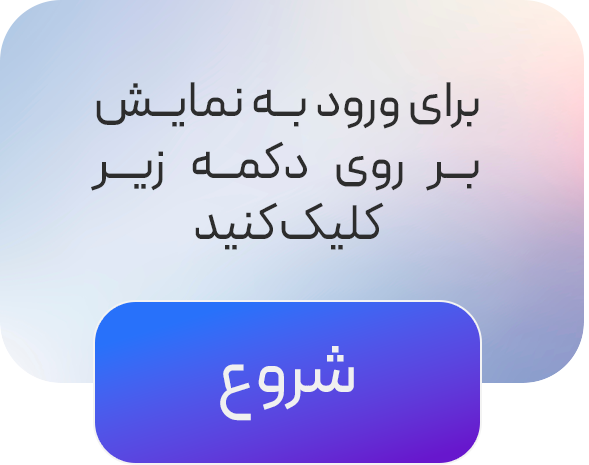
<style>
.page{position:relative;width:589px;height:465px}
.page>*{position:absolute;margin:0}
.t1{font:51px "Peyda-Regular";letter-spacing:-0.015em;color:#2d2d2d}
.t2{font:72px "Peyda-Regular";letter-spacing:-0.015em;color:#f0f0f0}
</style>
<div class="page">
<p class="t1" style="left:91px;top:82px;width:388px;height:168px;text-align:justify">برای ورود به نمایش<br>بر روی دکمه زیر کلیک کنید</p>
<p class="t2" style="left:220px;top:346px;width:134px;height:75px">شروع</p>
</div>
